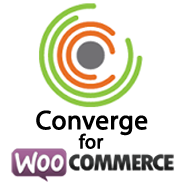
<style>
.page{position:relative;width:184px;height:184px;background:#ffffff}
.page>*{position:absolute;margin:0}
.t1{font:26.7px "MyriadPro-Regular";color:#000000;font-weight:bold}
.t2{font:20px "MyriadPro-Regular";color:#000000;font-weight:bold}
</style>
<div class="page">
<p class="t1" style="left:36px;top:110px;width:112px;height:26px">Converge</p>
<p class="t2" style="left:78px;top:133px;width:26px;height:16px">for</p>
</div>
